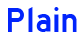
<style>
.page{position:relative;width:84px;height:46px;background:#ffffff}
.page>*{position:absolute;margin:0}
.t1{font:36px "HighwayGothic";color:#0124fb}
</style>
<div class="page">
<p class="t1" style="left:8px;top:7px;width:69px;height:25px">Plain</p>
</div>
